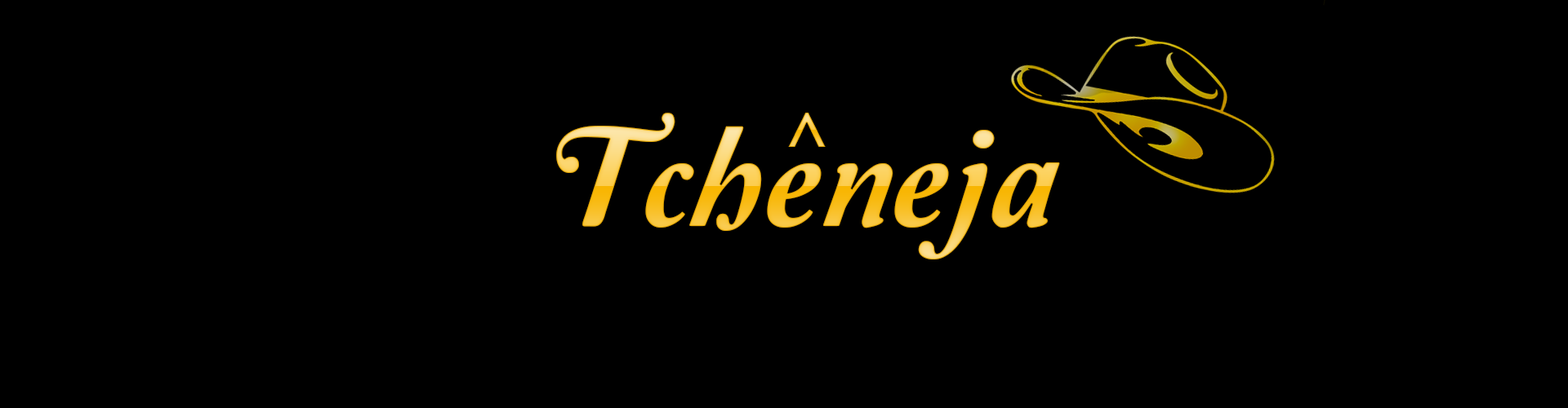
<style>
.page{position:relative;width:1568px;height:408px;background:#000000}
.page>*{position:absolute;margin:0}
.t1{font:146.8px "Amperzand"}
.t2{font:81.7px "Amperzand"}
</style>
<div class="page">
<p class="t1" style="left:556px;top:113px;width:504px;height:147px">Tcheneja</p>
<p class="t2" style="left:788px;top:113px;width:38px;height:34px">^</p>
</div>
